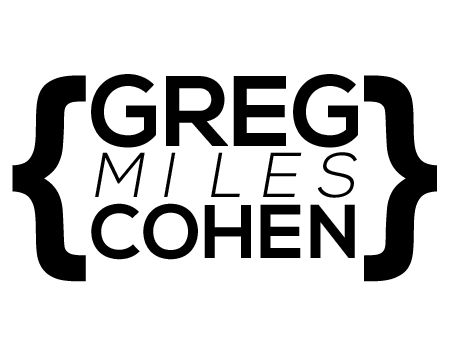
<style>
.page{position:relative;width:450px;height:350px;background:#ffffff}
.page>*{position:absolute;margin:0}
.t1{font:219.2px "CenturyGothic-Bold";color:#000000}
.t2{font:100px "NexaBold";color:#010000}
.t3{font:63px "NexaLight";color:#000000;font-style:italic}
.t4{font:76px "NexaBold";color:#000000}
</style>
<div class="page">
<p class="t1" style="left:12px;top:75px;width:74px;height:207px">{</p>
<p class="t2" style="left:91px;top:74px;width:267px;height:74px">GREG</p>
<p class="t1" style="left:364px;top:75px;width:73px;height:207px">}</p>
<p class="t3" style="left:95px;top:152px;width:262px;height:46px">M I  L E S</p>
<p class="t4" style="left:91px;top:203px;width:264px;height:57px">COHEN</p>
</div>
